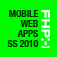
<style>
.page{position:relative;width:57px;height:57px;background:#00fc00}
.page>*{position:absolute;margin:0}
.t1{font:10px/10px "HelveticaNeue-CondensedBold";letter-spacing:-0.02em;color:#003500}
</style>
<div class="page">
<p class="t1" style="left:7px;top:10px;width:32px;height:37px;text-align:right">MOBILE<br>WEB<br>APPS<br>SS 2010</p>
</div>
